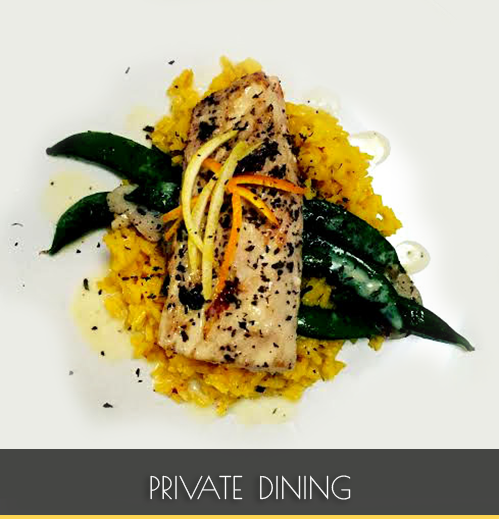
<style>
.page{position:relative;width:499px;height:519px;background:#ebece6}
.page>*{position:absolute;margin:0}
.t1{font:43.6px "PoiretOne-Regular";color:#ffffff;font-variant:small-caps}
</style>
<div class="page">
<p class="t1" style="left:150px;top:475px;width:201px;height:25px">private dining</p>
</div>
